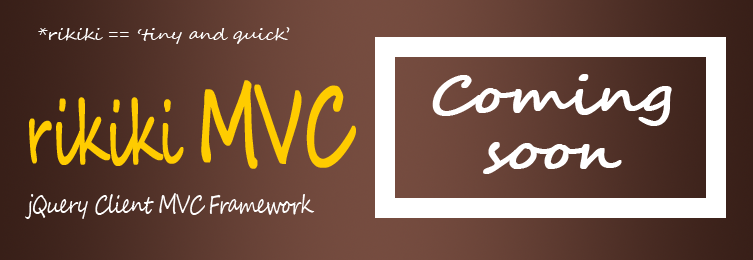
<style>
.page{position:relative;width:753px;height:260px}
.page>*{position:absolute;margin:0}
.t1{font:16.4px "SegoeScript";letter-spacing:-0.04em;color:#ffffff;scale:1.16 1}
.t2{font:52px/56.1px "SegoeScript";letter-spacing:-0.04em;color:#ffffff;font-weight:bold;scale:1.16 1}
.t3{font:86.9px "SegoeScript";letter-spacing:-0.04em;color:#ffcc00;font-weight:bold;scale:0.59 1}
.t4{font:104.9px "SegoeScript";letter-spacing:-0.04em;color:#ffcc00;font-weight:bold;scale:0.59 1}
.t5{font:24.6px "SegoeScript";letter-spacing:-0.04em;color:#ffffff;scale:0.76 1}
</style>
<div class="page">
<p class="t1" style="left:38px;top:27px;width:252px;height:17px">*rikiki == ‘tiny and quick’</p>
<p class="t2" style="left:432px;top:74px;width:240px;height:100px;text-align:center">Coming<br>soon</p>
<p class="t3" style="left:29px;top:80px;width:327px;height:89px">rikiki <span class="t4">MVC</span></p>
<p class="t5" style="left:25px;top:193px;width:290px;height:26px">jQuery Client MVC Framework</p>
</div>
